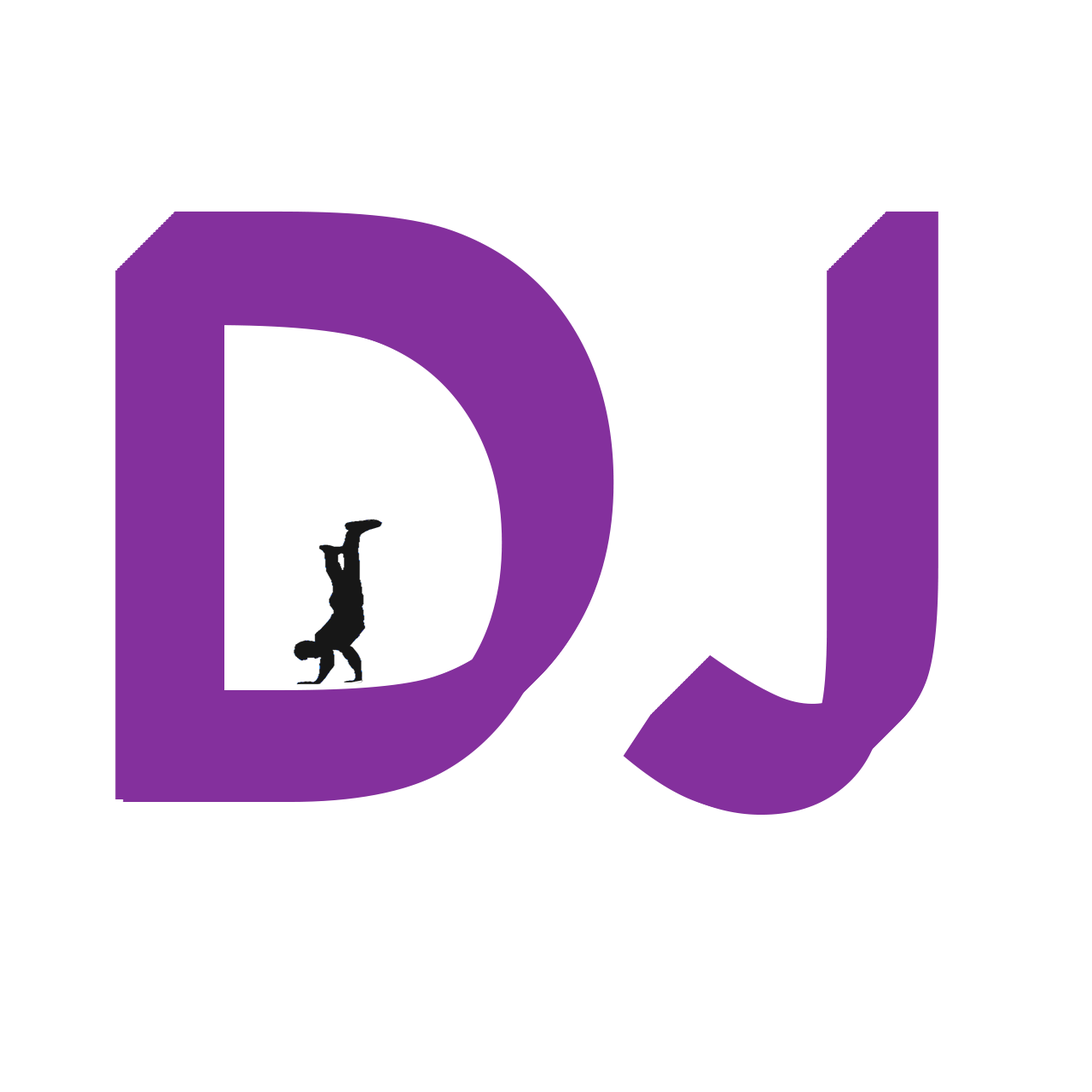
<style>
.page{position:relative;width:1092px;height:1092px;background:#ffffff}
.page>*{position:absolute;margin:0}
.t1{font:736.3px "CenturyGothic";color:#84309d}
</style>
<div class="page">
<p class="t1" style="left:163px;top:222px;width:764px;height:542px">DJ</p>
<p class="t1" style="left:164px;top:221px;width:764px;height:543px">DJ</p>
<p class="t1" style="left:166px;top:219px;width:764px;height:543px">DJ</p>
<p class="t1" style="left:166px;top:218px;width:765px;height:543px">DJ</p>
<p class="t1" style="left:168px;top:217px;width:764px;height:542px">DJ</p>
<p class="t1" style="left:169px;top:216px;width:764px;height:542px">DJ</p>
<p class="t1" style="left:171px;top:214px;width:764px;height:543px">DJ</p>
<p class="t1" style="left:171px;top:213px;width:765px;height:543px">DJ</p>
<p class="t1" style="left:173px;top:212px;width:765px;height:542px">DJ</p>
<p class="t1" style="left:174px;top:211px;width:764px;height:542px">DJ</p>
<p class="t1" style="left:151px;top:234px;width:764px;height:542px">DJ</p>
<p class="t1" style="left:153px;top:232px;width:764px;height:543px">DJ</p>
<p class="t1" style="left:154px;top:231px;width:764px;height:543px">DJ</p>
<p class="t1" style="left:155px;top:229px;width:765px;height:543px">DJ</p>
<p class="t1" style="left:156px;top:229px;width:765px;height:542px">DJ</p>
<p class="t1" style="left:158px;top:227px;width:764px;height:543px">DJ</p>
<p class="t1" style="left:159px;top:226px;width:764px;height:543px">DJ</p>
<p class="t1" style="left:160px;top:224px;width:765px;height:543px">DJ</p>
<p class="t1" style="left:161px;top:224px;width:765px;height:542px">DJ</p>
<p class="t1" style="left:140px;top:245px;width:764px;height:542px">DJ</p>
<p class="t1" style="left:141px;top:244px;width:764px;height:543px">DJ</p>
<p class="t1" style="left:142px;top:242px;width:765px;height:543px">DJ</p>
<p class="t1" style="left:143px;top:241px;width:765px;height:543px">DJ</p>
<p class="t1" style="left:145px;top:240px;width:764px;height:542px">DJ</p>
<p class="t1" style="left:146px;top:239px;width:764px;height:542px">DJ</p>
<p class="t1" style="left:148px;top:237px;width:764px;height:543px">DJ</p>
<p class="t1" style="left:148px;top:236px;width:765px;height:543px">DJ</p>
<p class="t1" style="left:150px;top:235px;width:765px;height:542px">DJ</p>
<p class="t1" style="left:127px;top:258px;width:765px;height:542px">DJ</p>
<p class="t1" style="left:128px;top:257px;width:764px;height:542px">DJ</p>
<p class="t1" style="left:130px;top:255px;width:764px;height:543px">DJ</p>
<p class="t1" style="left:131px;top:254px;width:764px;height:543px">DJ</p>
<p class="t1" style="left:132px;top:253px;width:765px;height:542px">DJ</p>
<p class="t1" style="left:133px;top:252px;width:764px;height:542px">DJ</p>
<p class="t1" style="left:135px;top:250px;width:764px;height:543px">DJ</p>
<p class="t1" style="left:136px;top:249px;width:764px;height:543px">DJ</p>
<p class="t1" style="left:137px;top:247px;width:765px;height:543px">DJ</p>
<p class="t1" style="left:138px;top:247px;width:765px;height:542px">DJ</p>
<p class="t1" style="left:115px;top:270px;width:765px;height:542px">DJ</p>
<p class="t1" style="left:117px;top:268px;width:764px;height:542px">DJ</p>
<p class="t1" style="left:118px;top:267px;width:764px;height:543px">DJ</p>
<p class="t1" style="left:119px;top:265px;width:765px;height:543px">DJ</p>
<p class="t1" style="left:120px;top:264px;width:765px;height:543px">DJ</p>
<p class="t1" style="left:122px;top:263px;width:764px;height:542px">DJ</p>
<p class="t1" style="left:123px;top:262px;width:764px;height:542px">DJ</p>
<p class="t1" style="left:125px;top:260px;width:764px;height:543px">DJ</p>
<p class="t1" style="left:125px;top:259px;width:765px;height:543px">DJ</p>
<p class="t1" style="left:123px;top:272px;width:764px;height:543px">DJ</p>
</div>
